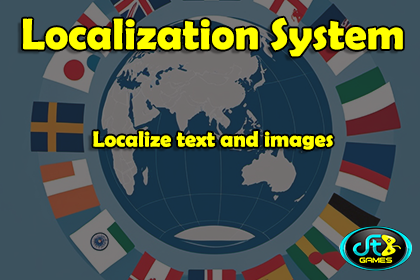
<style>
.page{position:relative;width:420px;height:280px}
.page>*{position:absolute;margin:0}
.t1{font:44px "BerlinSansFBDemi-Bold";color:#ffff00}
.t2{font:21.9px "BerlinSansFBDemi-Bold";color:#ffff00}
</style>
<div class="page">
<p class="t1" style="left:23px;top:17px;width:380px;height:40px">Localization System</p>
<p class="t2" style="left:93px;top:131px;width:240px;height:19px">Localize text and images</p>
</div>
